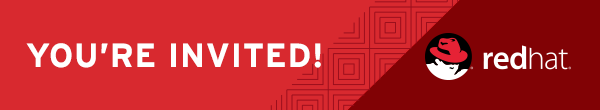
<style>
.page{position:relative;width:600px;height:110px;background:#d8292f}
.page>*{position:absolute;margin:0}
.t1{font:33.2px "Interstate-Bold";letter-spacing:0.03em;color:#ffffff;text-transform:uppercase}
</style>
<div class="page">
<p class="t1" style="left:26px;top:43px;width:295px;height:25px">You’re invited!</p>
</div>
